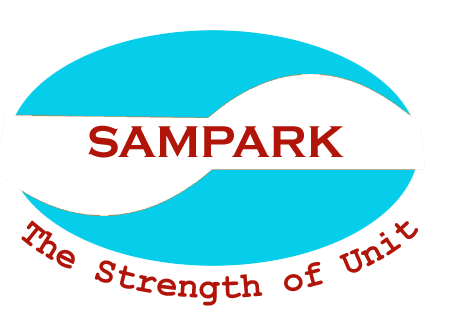
<style>
.page{position:relative;width:453px;height:324px;background:#ffffff}
.page>*{position:absolute;margin:0}
.t1{font:46px "CopperplateGothic-Bold";color:#b11509}
.t2{font:36px/36px "CourierNewPS-BoldMT";color:#b11509}
.t3{font:46px/36px "Courier";color:#b11509}
</style>
<div class="page">
<p class="t1" style="left:88px;top:125px;width:256px;height:33px">SAMPARK</p>
<p class="t2" style="left:21px;top:220px;width:397px;height:86px;text-align:center"><span class="t3">                           </span>The Strength of Unit</p>
</div>
